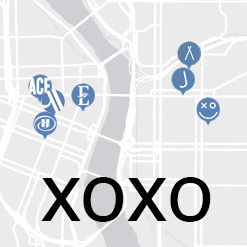
<style>
.page{position:relative;width:247px;height:247px;background:#ebebeb}
.page>*{position:absolute;margin:0}
.t1{font:81.9px "Helvetica";color:#000000}
</style>
<div class="page">
<p class="t1" style="left:41px;top:177px;width:170px;height:45px">xoxo</p>
</div>
